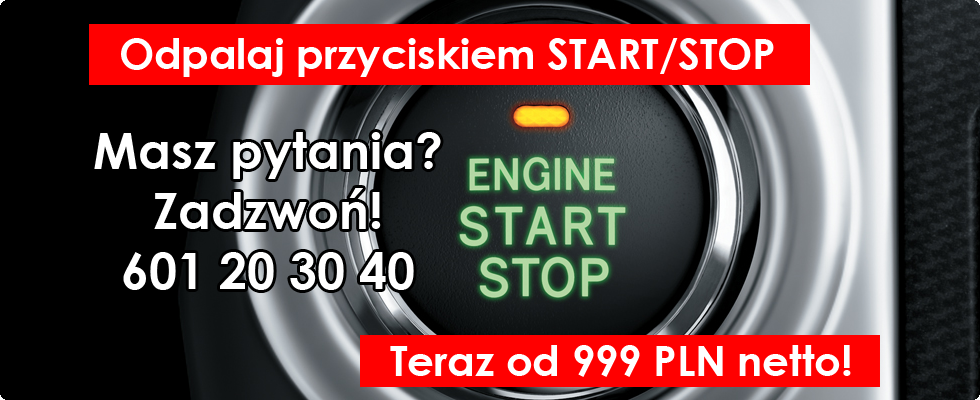
<style>
.page{position:relative;width:980px;height:400px;background:#000000}
.page>*{position:absolute;margin:0}
.t1{font:41.7px "CenturyGothic-Bold";color:#ffffff}
.t2{font:50px "CenturyGothic-Bold";color:#ffffff}
</style>
<div class="page">
<p class="t1" style="left:121px;top:38px;width:653px;height:39px">Odpalaj przyciskiem START/STOP</p>
<p class="t2" style="left:94px;top:132px;width:347px;height:158px;text-align:center">Masz pytania?<br>Zadzwoń!<br>601 20 30 40</p>
<p class="t1" style="left:390px;top:345px;width:461px;height:32px">Teraz od 999 PLN netto!</p>
</div>
